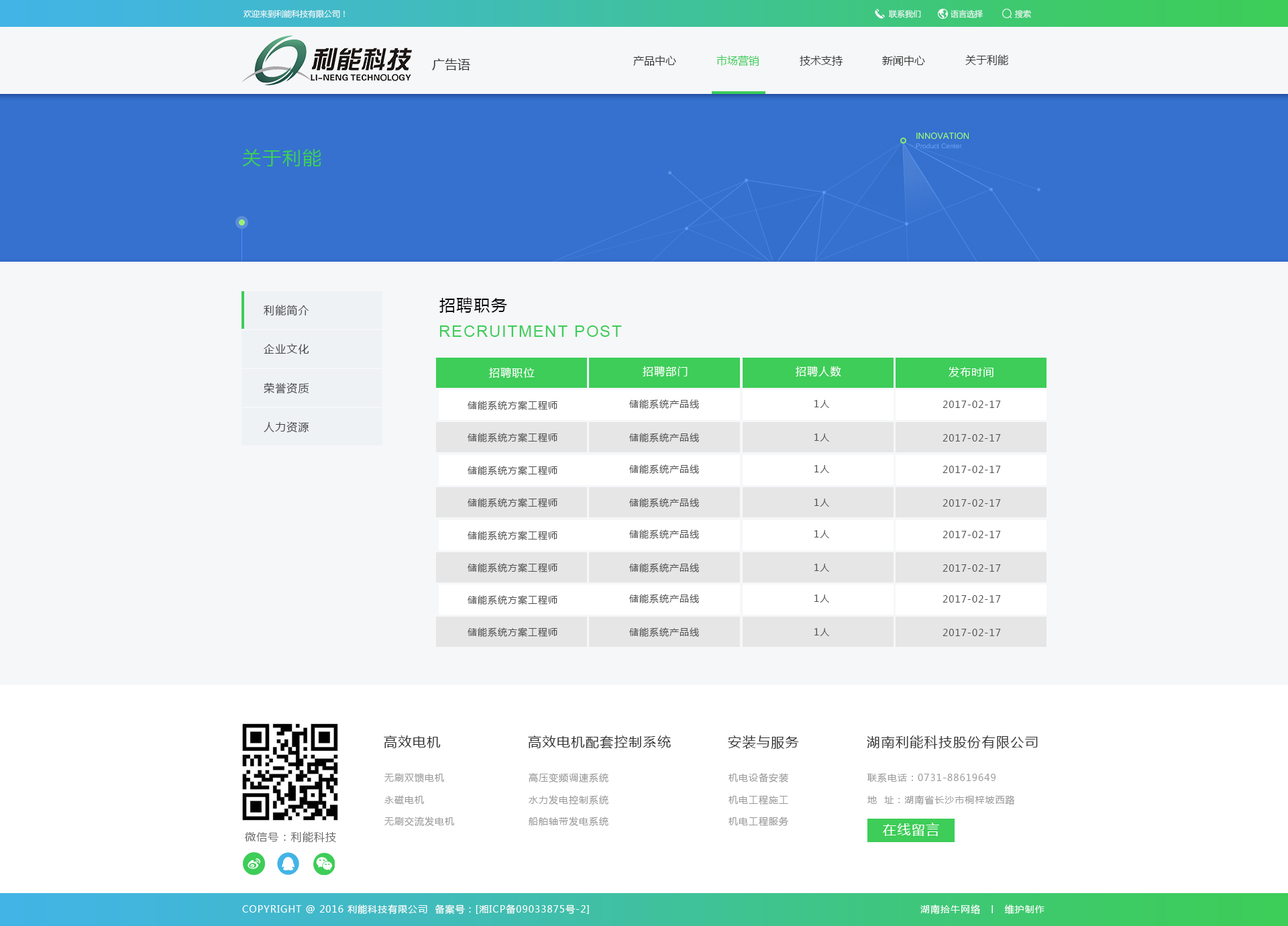
<style>
.page{position:relative;width:1288px;height:926px;background:#f6f7f9}
.page>*{position:absolute;margin:0}
.t1{font:8.1px "MicrosoftYaHei";color:#f6f7f9}
.t2{font:12.7px "MicrosoftYaHei";color:#343434}
.t3{font:10.7px "MicrosoftYaHei";color:#343434}
.t4{font:10.7px "MicrosoftYaHei";color:#3dcd58}
.t5{font:18.8px "MicrosoftYaHei";letter-spacing:0.072em;color:#3dcd58}
.t6{font:10.7px "MicrosoftYaHei";letter-spacing:0.072em;color:#444444}
.t7{font:16.1px "MicrosoftYaHei";letter-spacing:0.072em;color:#000000}
.t8{font:16.1px "ArialMT";letter-spacing:0.072em;color:#3dcd58}
.t9{font:10.7px "MicrosoftYaHei";letter-spacing:0.072em;color:#ffffff}
.t10{font:9.4px "MicrosoftYaHei";letter-spacing:0.072em;color:#525252}
.t11{font:13.4px "MicrosoftYaHei";letter-spacing:0.072em;color:#323232}
.t12{font:9.4px "MicrosoftYaHei";letter-spacing:0.072em;color:#9a9a9a}
.t13{font:10.7px "MicrosoftYaHei";letter-spacing:0.072em;color:#676767}
.t14{font:13.4px "MicrosoftYaHei";letter-spacing:0.072em;color:#ffffff}
.t15{font:9.4px "MicrosoftYaHei";letter-spacing:0.072em;color:#ffffff}
</style>
<div class="page">
<p class="t1" style="left:244px;top:9px;width:101px;height:9px">欢迎来到利能科技有限公司！</p>
<p class="t1" style="left:888px;top:10px;width:33px;height:8px">联系我们</p>
<p class="t1" style="left:951px;top:9px;width:32px;height:9px">语言选择</p>
<p class="t1" style="left:1015px;top:9px;width:16px;height:9px">搜索</p>
<p class="t2" style="left:432px;top:58px;width:38px;height:12px">广告语</p>
<p class="t3" style="left:633px;top:56px;width:43px;height:10px">产品中心</p>
<p class="t4" style="left:716px;top:55px;width:43px;height:11px">市场营销</p>
<p class="t3" style="left:800px;top:56px;width:43px;height:10px">技术支持</p>
<p class="t3" style="left:882px;top:56px;width:43px;height:10px">新闻中心</p>
<p class="t3" style="left:965px;top:54px;width:43px;height:11px">关于利能</p>
<p class="t5" style="left:242px;top:149px;width:79px;height:17px">关于利能</p>
<p class="t6" style="left:264px;top:305px;width:45px;height:11px">利能简介</p>
<p class="t7" style="left:439px;top:297px;width:68px;height:16px">招聘职务</p>
<p class="t8" style="left:439px;top:325px;width:183px;height:12px">RECRUITMENT POST</p>
<p class="t6" style="left:264px;top:343px;width:45px;height:11px">企业文化</p>
<p class="t9" style="left:643px;top:366px;width:45px;height:10px">招聘部门</p>
<p class="t9" style="left:796px;top:366px;width:45px;height:11px">招聘人数</p>
<p class="t9" style="left:489px;top:367px;width:46px;height:11px">招聘职位</p>
<p class="t9" style="left:949px;top:367px;width:45px;height:10px">发布时间</p>
<p class="t6" style="left:264px;top:382px;width:45px;height:12px">荣誉资质</p>
<p class="t10" style="left:468px;top:400px;width:89px;height:11px">储能系统方案工程师</p>
<p class="t10" style="left:629px;top:399px;width:70px;height:10px">储能系统产品线</p>
<p class="t10" style="left:814px;top:400px;width:16px;height:8px">1人</p>
<p class="t10" style="left:943px;top:400px;width:58px;height:8px">2017-02-17</p>
<p class="t6" style="left:264px;top:421px;width:45px;height:12px">人力资源</p>
<p class="t10" style="left:468px;top:433px;width:89px;height:10px">储能系统方案工程师</p>
<p class="t10" style="left:629px;top:433px;width:70px;height:9px">储能系统产品线</p>
<p class="t10" style="left:814px;top:433px;width:16px;height:8px">1人</p>
<p class="t10" style="left:943px;top:434px;width:58px;height:7px">2017-02-17</p>
<p class="t10" style="left:468px;top:466px;width:89px;height:10px">储能系统方案工程师</p>
<p class="t10" style="left:629px;top:464px;width:70px;height:10px">储能系统产品线</p>
<p class="t10" style="left:814px;top:465px;width:16px;height:8px">1人</p>
<p class="t10" style="left:943px;top:466px;width:58px;height:7px">2017-02-17</p>
<p class="t10" style="left:468px;top:498px;width:89px;height:10px">储能系统方案工程师</p>
<p class="t10" style="left:629px;top:498px;width:70px;height:9px">储能系统产品线</p>
<p class="t10" style="left:814px;top:498px;width:16px;height:8px">1人</p>
<p class="t10" style="left:943px;top:499px;width:58px;height:7px">2017-02-17</p>
<p class="t10" style="left:468px;top:531px;width:89px;height:10px">储能系统方案工程师</p>
<p class="t10" style="left:629px;top:529px;width:70px;height:10px">储能系统产品线</p>
<p class="t10" style="left:814px;top:530px;width:16px;height:8px">1人</p>
<p class="t10" style="left:943px;top:531px;width:58px;height:7px">2017-02-17</p>
<p class="t10" style="left:468px;top:563px;width:89px;height:10px">储能系统方案工程师</p>
<p class="t10" style="left:629px;top:563px;width:70px;height:9px">储能系统产品线</p>
<p class="t10" style="left:814px;top:564px;width:16px;height:8px">1人</p>
<p class="t10" style="left:943px;top:564px;width:58px;height:8px">2017-02-17</p>
<p class="t10" style="left:629px;top:594px;width:70px;height:9px">储能系统产品线</p>
<p class="t10" style="left:468px;top:595px;width:89px;height:10px">储能系统方案工程师</p>
<p class="t10" style="left:814px;top:594px;width:16px;height:8px">1人</p>
<p class="t10" style="left:943px;top:595px;width:58px;height:7px">2017-02-17</p>
<p class="t10" style="left:468px;top:627px;width:89px;height:10px">储能系统方案工程师</p>
<p class="t10" style="left:629px;top:627px;width:70px;height:10px">储能系统产品线</p>
<p class="t10" style="left:814px;top:628px;width:16px;height:8px">1人</p>
<p class="t10" style="left:943px;top:629px;width:58px;height:7px">2017-02-17</p>
<p class="t11" style="left:384px;top:735px;width:57px;height:13px">高效电机</p>
<p class="t11" style="left:528px;top:735px;width:143px;height:14px">高效电机配套控制系统</p>
<p class="t11" style="left:728px;top:735px;width:71px;height:14px">安装与服务</p>
<p class="t11" style="left:867px;top:735px;width:171px;height:14px">湖南利能科技股份有限公司</p>
<p class="t12" style="left:384px;top:773px;width:60px;height:9px">无刷双馈电机</p>
<p class="t12" style="left:529px;top:773px;width:79px;height:10px">高压变频调速系统</p>
<p class="t12" style="left:729px;top:773px;width:59px;height:9px">机电设备安装</p>
<p class="t12" style="left:867px;top:773px;width:129px;height:9px">联系电话：0731-88619649</p>
<p class="t12" style="left:384px;top:795px;width:40px;height:9px">永磁电机</p>
<p class="t12" style="left:529px;top:795px;width:79px;height:9px">水力发电控制系统</p>
<p class="t12" style="left:729px;top:795px;width:59px;height:10px">机电工程施工</p>
<p class="t12" style="left:867px;top:795px;width:148px;height:10px">地  址：湖南省长沙市桐梓坡西路</p>
<p class="t12" style="left:384px;top:816px;width:70px;height:10px">无刷交流发电机</p>
<p class="t12" style="left:529px;top:816px;width:79px;height:10px">船舶轴带发电系统</p>
<p class="t12" style="left:729px;top:816px;width:59px;height:10px">机电工程服务</p>
<p class="t13" style="left:245px;top:831px;width:91px;height:12px">微信号：利能科技</p>
<p class="t14" style="left:883px;top:822px;width:56px;height:14px">在线留言</p>
<p class="t15" style="left:242px;top:904px;width:347px;height:10px">COPYRIGHT @ 2016 利能科技有限公司  备案号：[湘ICP备09033875号-2]</p>
<p class="t15" style="left:920px;top:904px;width:125px;height:10px">湖南拾牛网络  丨  维护制作</p>
</div>
